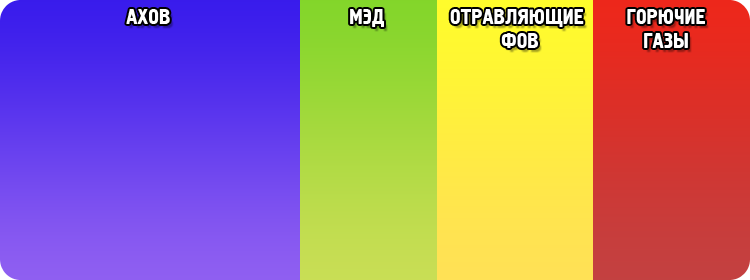
<style>
.page{position:relative;width:750px;height:280px}
.page>*{position:absolute;margin:0}
.t1{font:21.2px "Hermes";color:#ffffff;text-transform:uppercase}
.t2{font:21.2px/23.7px "Hermes";color:#ffffff;text-transform:uppercase}
</style>
<div class="page">
<p class="t1" style="left:126px;top:9px;width:44px;height:15px">АХОВ</p>
<p class="t1" style="left:350px;top:9px;width:34px;height:18px">МЭД</p>
<p class="t2" style="left:450px;top:9px;width:134px;height:39px;text-align:center">ОТРАВЛЯЮЩИЕ <br>ФОВ</p>
<p class="t2" style="left:627px;top:9px;width:78px;height:39px;text-align:center">ГОРЮЧИЕ<br>ГАЗЫ</p>
</div>
